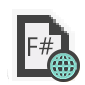
<style>
.page{position:relative;width:85px;height:85px;background:#ffffff}
.page>*{position:absolute;margin:0}
.t1{font:26.7px "SegoeUI";color:#424242}
</style>
<div class="page">
<p class="t1" style="left:28px;top:37px;width:26px;height:19px">F#</p>
</div>
